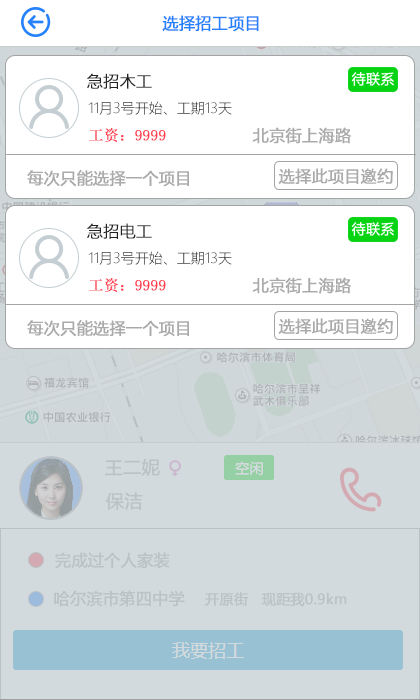
<style>
.page{position:relative;width:420px;height:700px;background:#ffffff}
.page>*{position:absolute;margin:0}
.t1{font:16px "MicrosoftYaHei";color:#2681fc;font-weight:bold}
.t2{font:16px "MicrosoftYaHeiLight";color:#252323;font-weight:bold}
.t3{font:14px "MicrosoftYaHeiLight"}
.t4{font:15px "SimSun";color:#ff3e50;font-weight:bold}
.t5{font:16px "MicrosoftYaHei";color:#aaaaaa;font-weight:bold}
.t6{font:18px "MicrosoftYaHei";color:#bbc2c6;font-weight:bold}
.t7{font:16px "MicrosoftYaHei";color:#bbc2c6;font-weight:bold}
.t8{font:14px "MicrosoftYaHei";color:#bbc2c6;font-weight:bold}
</style>
<div class="page">
<p class="t1" style="left:162px;top:15px;width:97px;height:17px">选择招工项目</p>
<p class="t2" style="left:87px;top:73px;width:65px;height:16px">急招木工</p>
<p class="t3" style="left:88px;top:101px;width:144px;height:14px">11月3号开始、工期13天</p>
<p class="t4" style="left:89px;top:128px;width:77px;height:14px">工资：9999</p>
<p class="t5" style="left:252px;top:127px;width:99px;height:17px">北京街上海路</p>
<p class="t5" style="left:27px;top:170px;width:162px;height:17px">每次只能选择一个项目</p>
<p class="t5" style="left:278px;top:168px;width:115px;height:17px">选择此项目邀约</p>
<p class="t2" style="left:87px;top:223px;width:65px;height:16px">急招电工</p>
<p class="t3" style="left:88px;top:251px;width:144px;height:14px">11月3号开始、工期13天</p>
<p class="t4" style="left:89px;top:278px;width:77px;height:14px">工资：9999</p>
<p class="t5" style="left:252px;top:277px;width:99px;height:17px">北京街上海路</p>
<p class="t5" style="left:278px;top:318px;width:115px;height:17px">选择此项目邀约</p>
<p class="t5" style="left:27px;top:320px;width:162px;height:17px">每次只能选择一个项目</p>
<p class="t6" style="left:105px;top:458px;width:55px;height:18px">王二妮</p>
<p class="t6" style="left:106px;top:492px;width:37px;height:18px">保洁</p>
<p class="t7" style="left:55px;top:552px;width:115px;height:17px">完成过个人家装</p>
<p class="t7" style="left:54px;top:590px;width:131px;height:17px">哈尔滨市第四中学</p>
<p class="t8" style="left:205px;top:592px;width:142px;height:15px">开原街   现距我0.9km</p>
</div>
